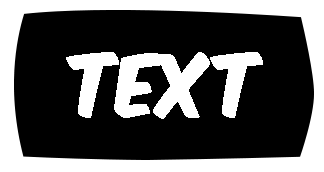
<style>
.page{position:relative;width:324px;height:172px;background:#000000}
.page>*{position:absolute;margin:0}
.t1{font:74.1px "KomikaAxis";color:#ffffff}
</style>
<div class="page">
<p class="t1" style="left:66px;top:52px;width:197px;height:67px">TEXT</p>
</div>
